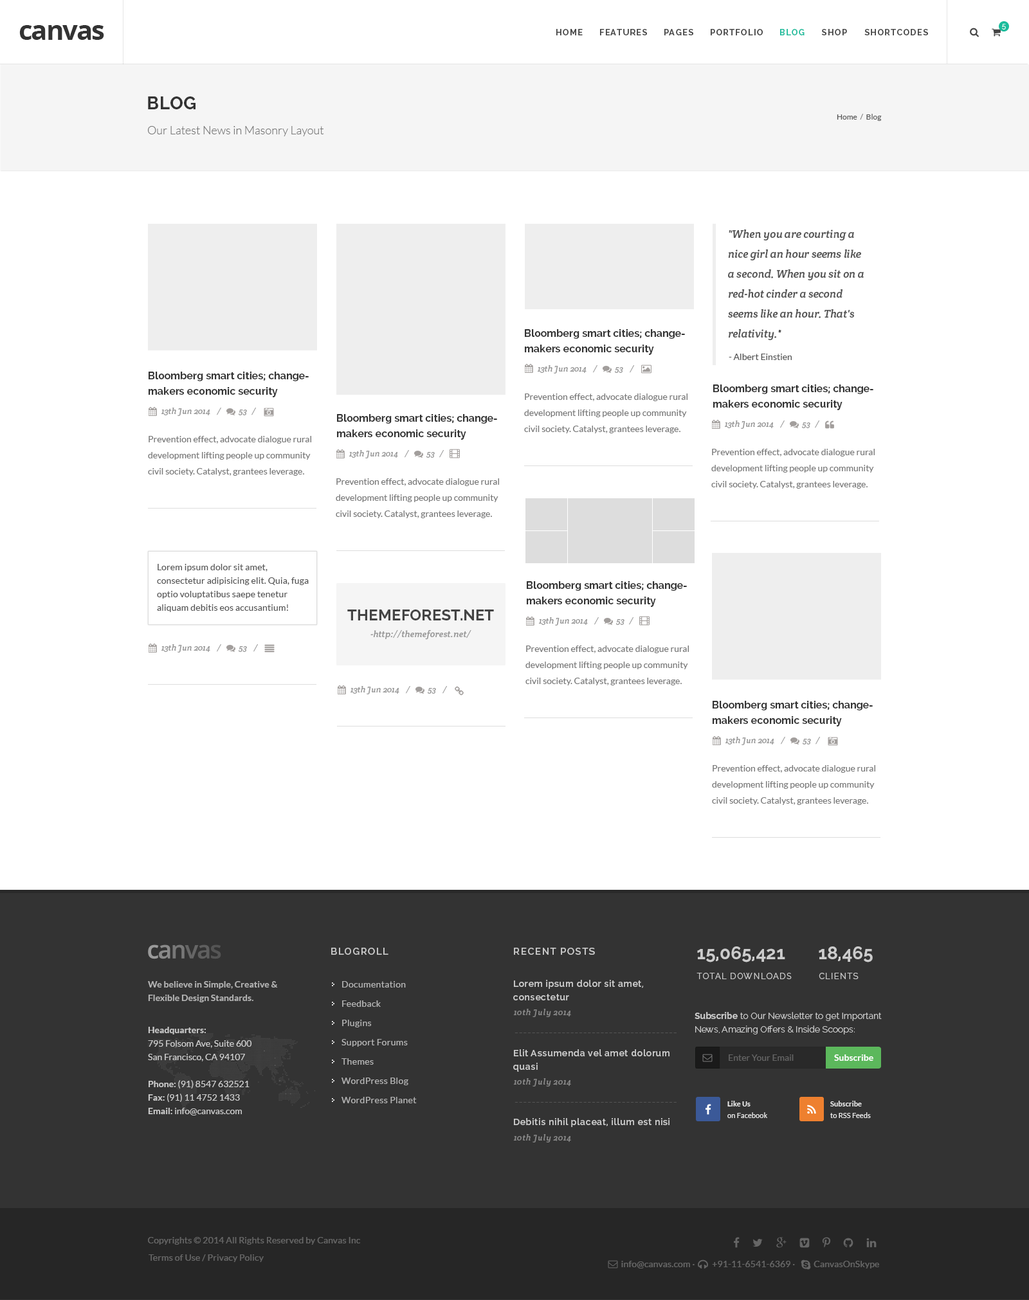
<style>
.page{position:relative;width:1029px;height:1300px;background:#ffffff}
.page>*{position:absolute;margin:0}
.t1{font:27px "OpenSans-Bold";letter-spacing:-0.05em;color:#333333}
.t2{font:8.4px "Raleway-Bold";letter-spacing:0.1em;color:#444444}
.t3{font:8.4px "Raleway-Bold";letter-spacing:0.1em;color:#1abc9c}
.t4{font:7.1px "Raleway-Light";letter-spacing:0.1em;color:#ffffff}
.t5{font:18px "Raleway-Bold";letter-spacing:0.025em;color:#333333;text-transform:uppercase}
.t6{font:7.7px "Lato-Regular";color:#555555}
.t7{font:7.7px "Lato-Regular";color:#777777}
.t8{font:11.6px "Lato-Light";color:#777777}
.t9{font:10.9px/19.9px "CreteRound-Italic";color:#555555}
.t10{font:10.3px/15.4px "Raleway-Bold";color:#333333}
.t11{font:9px "Lato-Regular";color:#555555}
.t12{font:8.4px "CreteRound-Italic";color:#999999}
.t13{font:9px/16.1px "Lato-Regular";color:#777777}
.t14{font:9px/13.5px "Lato-Regular";letter-spacing:0.01em;color:#555555}
.t15{font:15.4px "Raleway-Bold";letter-spacing:0.01em;color:#444444;text-transform:uppercase}
.t16{font:9px "CreteRound-Italic";letter-spacing:0.01em;color:#999999}
.t17{font:9.6px "Raleway-SemiBold";letter-spacing:0.1em;color:#cccccc}
.t18{font:18px "Raleway-Bold";color:#cccccc}
.t19{font:8.4px "Raleway-Regular";letter-spacing:0.1em;color:#cacaca;text-transform:uppercase}
.t20{font:9px/13.5px "Lato-Bold";color:#cccccc}
.t21{font:9px/19.3px "Lato-Regular";letter-spacing:0.025em;color:#cccccc}
.t22{font:9px/13.5px "Raleway-SemiBold";letter-spacing:0.05em;color:#cccccc}
.t23{font:8.4px "CreteRound-Italic";letter-spacing:0.05em;color:#888888}
.t24{font:9px/13.5px "Raleway-Light";color:#cccccc}
.t25{font:9px/13.5px "Raleway-Bold";color:#cccccc}
.t26{font:9px/13.5px "Lato-Regular";color:#cccccc}
.t27{font:11.6px "Lato-Italic";letter-spacing:0.05em;color:#545454}
.t28{font:9px "Lato-Regular";color:#777777}
.t29{font:9px "Lato-Bold";color:#ffffff}
.t30{font:7.1px/11.6px "Lato-Regular";letter-spacing:0.01em;color:#eeeeee}
.t31{font:7.1px/11.6px "Lato-Bold";letter-spacing:0.01em;color:#eeeeee}
.t32{font:9px "Raleway-SemiBold";letter-spacing:0.05em;color:#cccccc}
.t33{font:9px "Lato-Regular";letter-spacing:0.01em;color:#666666}
</style>
<div class="page">
<p class="t1" style="left:19px;top:25px;width:85px;height:15px">canvas</p>
<p class="t2" style="left:556px;top:29px;width:26px;height:6px">HOME</p>
<p class="t2" style="left:600px;top:29px;width:47px;height:6px">FEATURES</p>
<p class="t2" style="left:664px;top:29px;width:29px;height:6px">PAGES</p>
<p class="t2" style="left:710px;top:29px;width:52px;height:6px">PORTFOLIO</p>
<p class="t3" style="left:780px;top:29px;width:24px;height:6px">BLOG</p>
<p class="t2" style="left:822px;top:29px;width:25px;height:6px">SHOP</p>
<p class="t2" style="left:864px;top:29px;width:64px;height:6px">SHORTCODES</p>
<p class="t4" style="left:1002px;top:24px;width:3px;height:6px">5</p>
<p class="t5" style="left:148px;top:96px;width:47px;height:13px">BLOG</p>
<p class="t6" style="left:836px;top:114px;width:45px;height:7px">Home  <span class="t7">/ </span> Blog</p>
<p class="t8" style="left:147px;top:126px;width:177px;height:10px">Our Latest News in Masonry Layout</p>
<p class="t9" style="left:728px;top:230px;width:135px;height:110px">"When you are courting a<br>nice girl an hour seems like<br>a second. When you sit on a<br>red-hot cinder a second<br>seems like an hour. That's<br>relativity."</p>
<p class="t10" style="left:525px;top:329px;width:160px;height:26px">Bloomberg smart cities; change-<br>makers economic security</p>
<p class="t11" style="left:728px;top:354px;width:63px;height:6px">- Albert Einstien</p>
<p class="t12" style="left:537px;top:365px;width:97px;height:9px">13th Jun 2014    /           53    /</p>
<p class="t10" style="left:148px;top:372px;width:161px;height:25px">Bloomberg smart cities; change-<br>makers economic security</p>
<p class="t10" style="left:713px;top:384px;width:160px;height:26px">Bloomberg smart cities; change-<br>makers economic security</p>
<p class="t13" style="left:524px;top:393px;width:163px;height:40px">Prevention effect, advocate dialogue rural<br>development lifting people up community<br>civil society. Catalyst, grantees leverage.</p>
<p class="t12" style="left:161px;top:408px;width:95px;height:8px">13th Jun 2014    /           53   /</p>
<p class="t10" style="left:337px;top:414px;width:160px;height:26px">Bloomberg smart cities; change-<br>makers economic security</p>
<p class="t12" style="left:724px;top:420px;width:95px;height:9px">13th Jun 2014    /           53   /</p>
<p class="t13" style="left:148px;top:436px;width:163px;height:40px">Prevention effect, advocate dialogue rural<br>development lifting people up community<br>civil society. Catalyst, grantees leverage.</p>
<p class="t13" style="left:711px;top:449px;width:163px;height:40px">Prevention effect, advocate dialogue rural<br>development lifting people up community<br>civil society. Catalyst, grantees leverage.</p>
<p class="t12" style="left:348px;top:450px;width:96px;height:8px">13th Jun 2014    /           53   /</p>
<p class="t13" style="left:336px;top:478px;width:163px;height:40px">Prevention effect, advocate dialogue rural<br>development lifting people up community<br>civil society. Catalyst, grantees leverage.</p>
<p class="t14" style="left:157px;top:564px;width:152px;height:48px">Lorem ipsum dolor sit amet,<br>consectetur adipisicing elit. Quia, fuga<br>optio voluptatibus saepe tenetur<br>aliquam debitis eos accusantium!</p>
<p class="t10" style="left:526px;top:581px;width:161px;height:26px">Bloomberg smart cities; change-<br>makers economic security</p>
<p class="t15" style="left:347px;top:609px;width:147px;height:11px">Themeforest.net</p>
<p class="t12" style="left:538px;top:617px;width:95px;height:9px">13th Jun 2014    /           53   /</p>
<p class="t16" style="left:370px;top:630px;width:101px;height:10px">-http://themeforest.net/</p>
<p class="t12" style="left:161px;top:644px;width:97px;height:8px">13th Jun 2014    /           53    /</p>
<p class="t13" style="left:525px;top:645px;width:163px;height:40px">Prevention effect, advocate dialogue rural<br>development lifting people up community<br>civil society. Catalyst, grantees leverage.</p>
<p class="t12" style="left:350px;top:686px;width:97px;height:8px">13th Jun 2014    /           53    /</p>
<p class="t10" style="left:712px;top:701px;width:160px;height:25px">Bloomberg smart cities; change-<br>makers economic security</p>
<p class="t12" style="left:724px;top:737px;width:96px;height:8px">13th Jun 2014    /           53   /</p>
<p class="t13" style="left:712px;top:765px;width:163px;height:40px">Prevention effect, advocate dialogue rural<br>development lifting people up community<br>civil society. Catalyst, grantees leverage.</p>
<p class="t17" style="left:331px;top:948px;width:57px;height:7px">BLOGROLL</p>
<p class="t17" style="left:514px;top:948px;width:81px;height:7px">RECENT POSTS</p>
<p class="t18" style="left:697px;top:946px;width:88px;height:16px">15,065,421</p>
<p class="t18" style="left:818px;top:946px;width:54px;height:16px">18,465</p>
<p class="t19" style="left:696px;top:973px;width:95px;height:6px">TOTAL Downloads</p>
<p class="t19" style="left:818px;top:973px;width:40px;height:6px">CLIENTS</p>
<p class="t20" style="left:148px;top:981px;width:130px;height:21px;opacity:0.8">We believe in Simple, Creative &amp;<br>Flexible Design Standards.</p>
<p class="t21" style="left:341px;top:981px;width:76px;height:122px;opacity:0.8">Documentation<br>Feedback<br>Plugins<br>Support Forums<br>Themes<br>WordPress Blog<br>WordPress Planet</p>
<p class="t22" style="left:513px;top:980px;width:130px;height:20px">Lorem ipsum dolor sit amet,<br>consectetur</p>
<p class="t23" style="left:513px;top:1009px;width:58px;height:8px">10th July 2014</p>
<p class="t24" style="left:694px;top:1012px;width:187px;height:22px"><span class="t25">Subscribe</span> to Our Newsletter to get Important<br>News, Amazing Offers &amp; Inside Scoops:</p>
<p class="t26" style="left:148px;top:1027px;width:104px;height:88px"><span class="t20">Headquarters:<br></span>795 Folsom Ave, Suite 600<br>San Francisco, CA 94107<br><span class="t20"><br>Phone: </span>(91) 8547 632521<br><span class="t20">Fax: </span>(91) 11 4752 1433<br><span class="t20">Email: </span>info@canvas.com</p>
<p class="t27" style="left:514px;top:1032px;width:162px;height:1px">--------------------------------------</p>
<p class="t22" style="left:513px;top:1049px;width:156px;height:23px">Elit Assumenda vel amet dolorum<br>quasi</p>
<p class="t28" style="left:728px;top:1054px;width:65px;height:7px;opacity:0.7">Enter Your Email</p>
<p class="t29" style="left:834px;top:1054px;width:39px;height:7px">Subscribe</p>
<p class="t23" style="left:513px;top:1078px;width:58px;height:8px">10th July 2014</p>
<p class="t27" style="left:514px;top:1102px;width:162px;height:0px">--------------------------------------</p>
<p class="t30" style="left:727px;top:1101px;width:40px;height:17px"><span class="t31">Like Us<br></span>on Facebook</p>
<p class="t30" style="left:830px;top:1101px;width:40px;height:17px"><span class="t31">Subscribe<br></span>to RSS Feeds</p>
<p class="t32" style="left:514px;top:1118px;width:155px;height:9px">Debitis nihil placeat, illum est nisi</p>
<p class="t23" style="left:513px;top:1134px;width:58px;height:8px">10th July 2014</p>
<p class="t33" style="left:148px;top:1237px;width:212px;height:8px">Copyrights © 2014 All Rights Reserved by Canvas Inc</p>
<p class="t33" style="left:148px;top:1254px;width:116px;height:8px">Terms of Use / Privacy Policy</p>
<p class="t33" style="left:621px;top:1261px;width:258px;height:7px">info@canvas.com ·   +91-11-6541-6369 ·        CanvasOnSkype</p>
</div>
